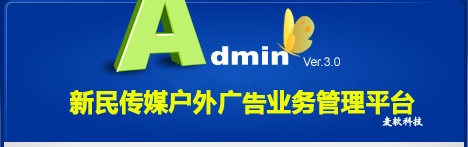
<style>
.page{position:relative;width:468px;height:147px}
.page>*{position:absolute;margin:0}
.t1{font:24px "MicrosoftYaHei";color:#eff807;font-weight:bold}
.t2{font:10px "KaiTi_GB2312";color:#fafaf3;font-weight:bold}
</style>
<div class="page">
<p class="t1" style="left:69px;top:89px;width:346px;height:26px">新民传媒户外广告业务管理平台</p>
<p class="t2" style="left:382px;top:116px;width:41px;height:11px">麦软科技</p>
</div>
